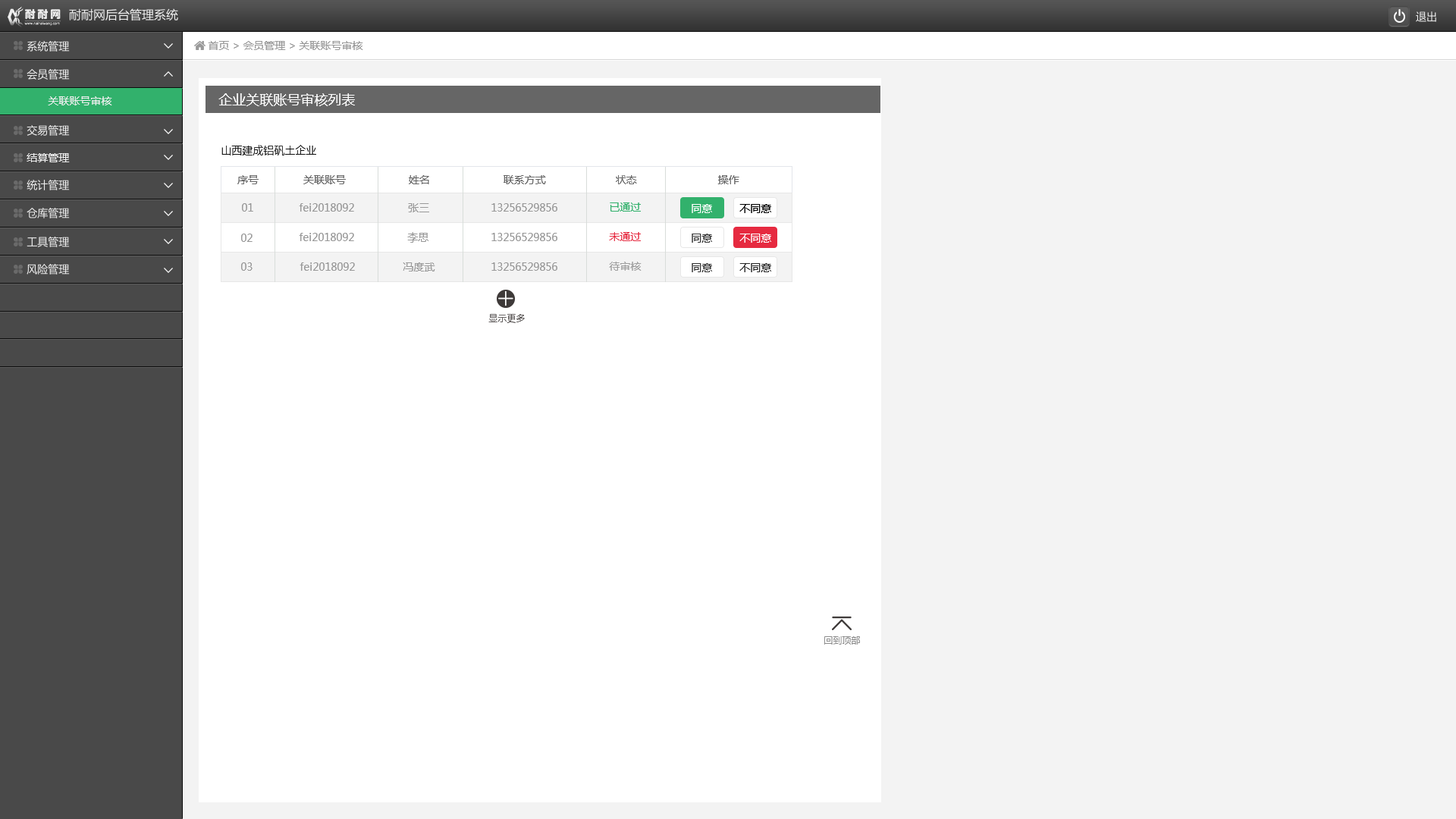
<style>
.page{position:relative;width:1456px;height:819px;background:#f3f3f3}
.page>*{position:absolute;margin:0}
.t1{font:12.1px "MicrosoftYaHei";color:#efefef}
.t2{font:10.6px "MicrosoftYaHei";color:#efefef}
.t3{font:10.6px "MicrosoftYaHei";color:#999999}
.t4{font:13.6px "MicrosoftYaHei";color:#ffffff}
.t5{font:10.6px "MicrosoftYaHeiLight";color:#000000}
.t6{font:10.6px "MicrosoftYaHei";color:#666666}
.t7{font:10.6px "MicrosoftYaHei";color:#32b16c}
.t8{font:10.6px "MicrosoftYaHei";color:#ffffff}
.t9{font:10.6px "MicrosoftYaHei";color:#000000}
.t10{font:10.6px "MicrosoftYaHei";color:#e62a40}
.t11{font:10.6px "MicrosoftYaHei";color:#333333}
.t12{font:10.6px "MicrosoftYaHei";color:#9f9f9f}
.t13{font:10.6px "MicrosoftYaHei";color:#272727}
.t14{font:9.1px "MicrosoftYaHeiLight";color:#3e3a39}
.t15{font:9.1px "MicrosoftYaHeiLight"}
</style>
<div class="page">
<p class="t1" style="left:69px;top:8px;width:109px;height:13px">耐耐网后台管理系统</p>
<p class="t2" style="left:1416px;top:11px;width:20px;height:11px">退出</p>
<p class="t2" style="left:27px;top:41px;width:43px;height:11px">系统管理</p>
<p class="t3" style="left:208px;top:41px;width:155px;height:9px">首页 &gt; 会员管理 &gt; 关联账号审核</p>
<p class="t2" style="left:27px;top:69px;width:43px;height:11px">会员管理</p>
<p class="t2" style="left:48px;top:96px;width:64px;height:9px">关联账号审核</p>
<p class="t4" style="left:218px;top:93px;width:137px;height:13px">企业关联账号审核列表</p>
<p class="t2" style="left:27px;top:125px;width:43px;height:11px">交易管理</p>
<p class="t5" style="left:221px;top:145px;width:95px;height:10px">山西建成铝矾土企业</p>
<p class="t2" style="left:27px;top:153px;width:43px;height:9px">结算管理</p>
<p class="t2" style="left:27px;top:180px;width:43px;height:10px">统计管理</p>
<p class="t6" style="left:237px;top:175px;width:22px;height:9px">序号</p>
<p class="t6" style="left:303px;top:175px;width:43px;height:9px">关联账号</p>
<p class="t6" style="left:409px;top:175px;width:20px;height:9px">姓名</p>
<p class="t6" style="left:504px;top:175px;width:42px;height:9px">联系方式</p>
<p class="t6" style="left:616px;top:175px;width:21px;height:9px">状态</p>
<p class="t6" style="left:717px;top:175px;width:22px;height:9px">操作</p>
<p class="t2" style="left:27px;top:208px;width:43px;height:10px">仓库管理</p>
<p class="t3" style="left:242px;top:203px;width:11px;height:9px">01</p>
<p class="t3" style="left:299px;top:203px;width:55px;height:9px">fei2018092</p>
<p class="t3" style="left:408px;top:203px;width:21px;height:9px">张三</p>
<p class="t3" style="left:491px;top:203px;width:66px;height:9px">13256529856</p>
<p class="t7" style="left:610px;top:202px;width:31px;height:10px">已通过</p>
<p class="t8" style="left:692px;top:204px;width:20px;height:9px">同意</p>
<p class="t9" style="left:739px;top:204px;width:32px;height:9px">不同意</p>
<p class="t3" style="left:241px;top:234px;width:12px;height:8px">02</p>
<p class="t3" style="left:299px;top:233px;width:55px;height:8px">fei2018092</p>
<p class="t3" style="left:407px;top:232px;width:21px;height:11px">李思</p>
<p class="t3" style="left:491px;top:233px;width:66px;height:8px">13256529856</p>
<p class="t10" style="left:609px;top:232px;width:32px;height:9px">未通过</p>
<p class="t11" style="left:692px;top:234px;width:20px;height:9px">同意</p>
<p class="t8" style="left:739px;top:234px;width:32px;height:9px">不同意</p>
<p class="t2" style="left:27px;top:237px;width:43px;height:10px">工具管理</p>
<p class="t2" style="left:27px;top:264px;width:43px;height:11px">风险管理</p>
<p class="t3" style="left:241px;top:262px;width:12px;height:9px">03</p>
<p class="t3" style="left:300px;top:262px;width:55px;height:9px">fei2018092</p>
<p class="t3" style="left:403px;top:262px;width:32px;height:9px">冯度武</p>
<p class="t3" style="left:491px;top:262px;width:66px;height:9px">13256529856</p>
<p class="t12" style="left:609px;top:262px;width:33px;height:9px">待审核</p>
<p class="t11" style="left:692px;top:263px;width:20px;height:9px">同意</p>
<p class="t13" style="left:739px;top:263px;width:32px;height:9px">不同意</p>
<p class="t14" style="left:488px;top:314px;width:37px;height:9px">显示更多</p>
<p class="t15" style="left:824px;top:636px;width:36px;height:9px">回到顶部</p>
</div>
